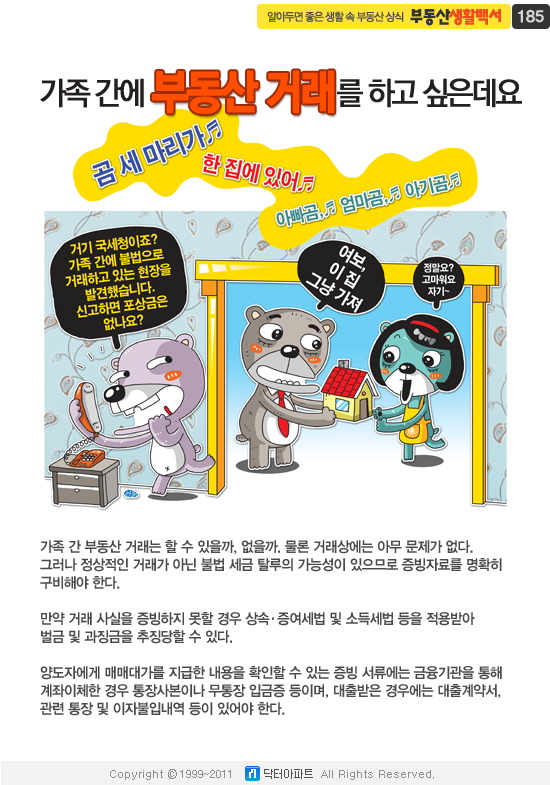
<style>
.page{position:relative;width:550px;height:785px;background:#ffffff}
.page>*{position:absolute;margin:0}
.t1{font:16px "YDIYGO360";color:#d6d6d6;text-transform:uppercase}
.t2{font:31.5px "YGO530";letter-spacing:-0.115em;color:#231f20;font-weight:bold;scale:0.95 1}
.t3{font:46.1px "YGO550";letter-spacing:-0.1em;color:#ff4e00;font-weight:bold;scale:0.91 1}
.t4{font:31.5px "YGO530";letter-spacing:-0.115em;color:#232021;font-weight:bold;scale:0.95 1}
.t5{font:14.6px/18px "YDVYGO34";letter-spacing:-0.04em;color:#4a4a4a;scale:0.93 1}
.t6{font:14.6px "YDVYGO34";letter-spacing:-0.04em;color:#4a4a4a;scale:0.93 1}
.t7{font:11px "Dotum";color:#8e8e8e}
</style>
<div class="page">
<p class="t1" style="left:518px;top:9px;width:26px;height:14px">185</p>
<p class="t2" style="left:40px;top:78px;width:104px;height:30px">가족 간에</p>
<p class="t3" style="left:152px;top:70px;width:183px;height:44px">부동산 거래</p>
<p class="t4" style="left:337px;top:78px;width:185px;height:30px">를 하고 싶은데요</p>
<p class="t5" style="left:40px;top:540px;width:462px;height:176px;text-align:justify">가족 간 부동산 거래는 할 수 있을까, 없을까. 물론 거래상에는 아무 문제가 없다.<br>그러나 정상적인 거래가 아닌 불법 세금 탈루의 가능성이 있으므로 증빙자료를 명확히<br>구비해야 한다. <br><br>만약 거래 사실을 증빙하지 못할 경우 상속  증여세법 및 소득세법 등을 적용받아<br>벌금 및 과징금을 추징당할 수 있다. <br><br>양도자에게 매매대가를 지급한 내용을 확인할 수 있는 증빙 서류에는 금융기관을 통해<br>계좌이체한 경우 통장사본이나 무통장 입금증 등이며, 대출받은 경우에는 대출계약서,<br>관련 통장 및 이자불입내역 등이 있어야 한다.</p>
<p class="t6" style="left:272px;top:617px;width:2px;height:3px">.</p>
<p class="t7" style="left:180px;top:770px;width:51px;height:8px">1999~2011</p>
</div>
